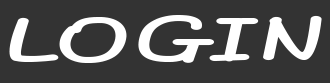
<style>
.page{position:relative;width:330px;height:83px;background:#333333}
.page>*{position:absolute;margin:0}
.t1{font:90px "FontNongnam-Bold";color:#ffffff;scale:1.77 1}
</style>
<div class="page">
<p class="t1" style="left:9px;top:15px;width:313px;height:48px">LOGIN</p>
</div>
